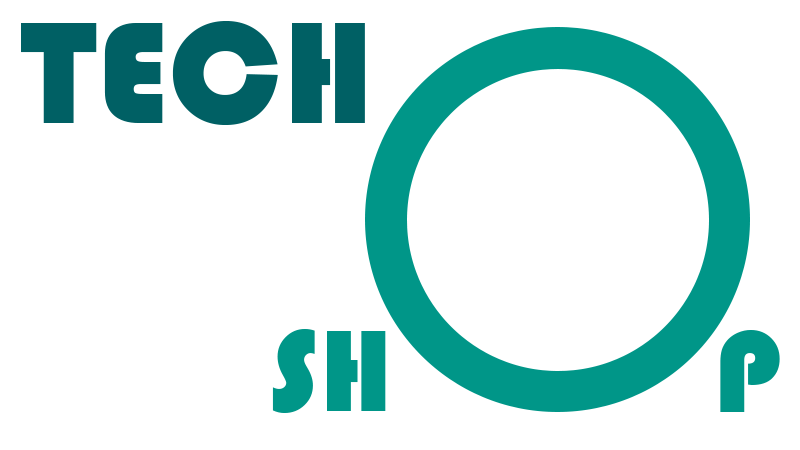
<style>
.page{position:relative;width:800px;height:450px;background:#ffffff}
.page>*{position:absolute;margin:0}
.t1{font:150px "Bauhaus93";color:#006064;text-transform:uppercase}
.t2{font:120px "Bauhaus93";color:#009688;text-transform:uppercase}
</style>
<div class="page">
<p class="t1" style="left:21px;top:21px;width:344px;height:104px">Tech</p>
<p class="t2" style="left:272px;top:329px;width:114px;height:84px">sh</p>
<p class="t2" style="left:720px;top:330px;width:60px;height:82px">p</p>
</div>
